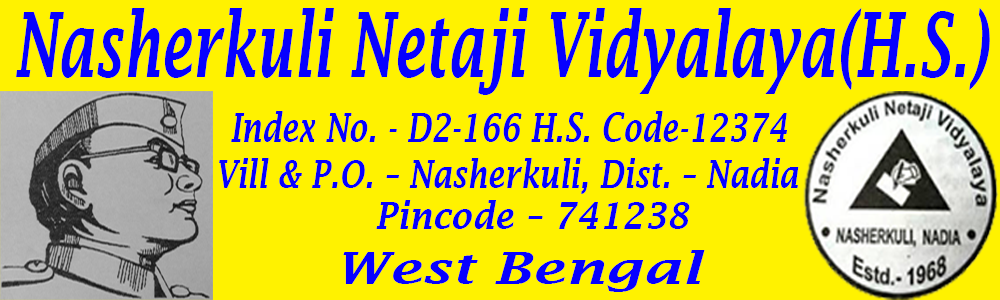
<style>
.page{position:relative;width:1000px;height:300px;background:#fff200}
.page>*{position:absolute;margin:0}
.t1{font:89.3px "LucidaFax-DemiItalic";color:#0600ff;scale:0.62 1}
.t2{font:40.2px "LucidaFax-DemiItalic";color:#0600ff;scale:0.75 1}
.t3{font:37.8px "LucidaFax-DemiItalic";color:#0600ff;scale:0.79 1}
.t4{font:37.1px "LucidaFax-DemiItalic";color:#0600ff;scale:0.92 1}
.t5{font:43.9px "LucidaFax-DemiItalic";color:#0600ff;scale:1.33 1}
</style>
<div class="page">
<p class="t1" style="left:16px;top:8px;width:974px;height:87px">Nasherkuli Netaji Vidyalaya(H.S.)</p>
<p class="t2" style="left:231px;top:111px;width:556px;height:31px">Index No. - D2-166 H.S. Code-12374</p>
<p class="t3" style="left:219px;top:158px;width:580px;height:36px">Vill &amp; P.O. – Nasherkuli, Dist. – Nadia</p>
<p class="t4" style="left:376px;top:200px;width:314px;height:29px">Pincode – 741238</p>
<p class="t5" style="left:343px;top:250px;width:362px;height:42px">West Bengal</p>
</div>
